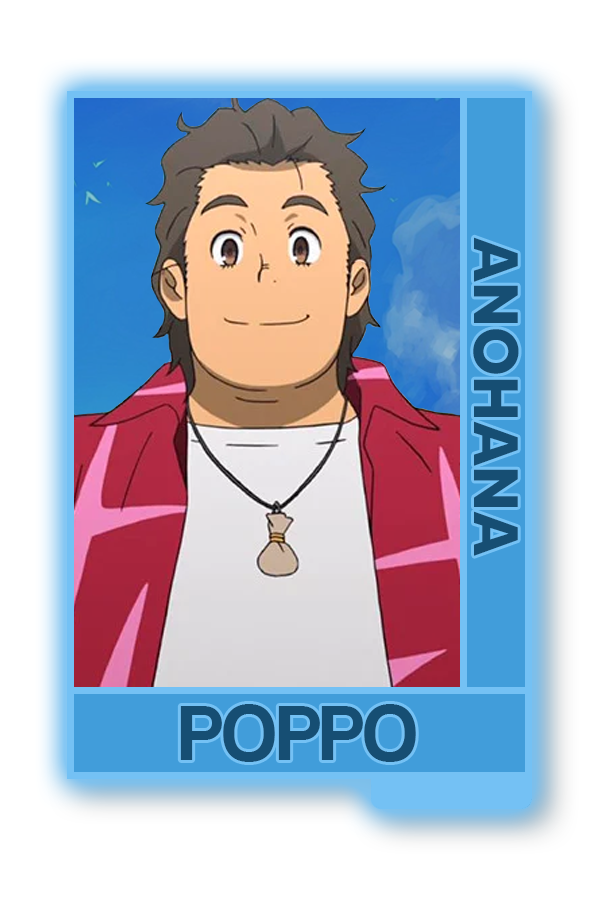
<style>
.page{position:relative;width:600px;height:900px;background:#ffffff}
.page>*{position:absolute;margin:0}
.t1{font:62.6px "MADETOMMY-Bold";color:#164e73}
.t2{font:81px "CoolveticaRg-Regular";color:#164e73}
</style>
<div class="page">
<p class="t1" style="left:473px;top:237px;width:46px;height:319px;rotate:90deg">ANOHANA</p>
<p class="t2" style="left:180px;top:704px;width:236px;height:58px">POPPO</p>
</div>
